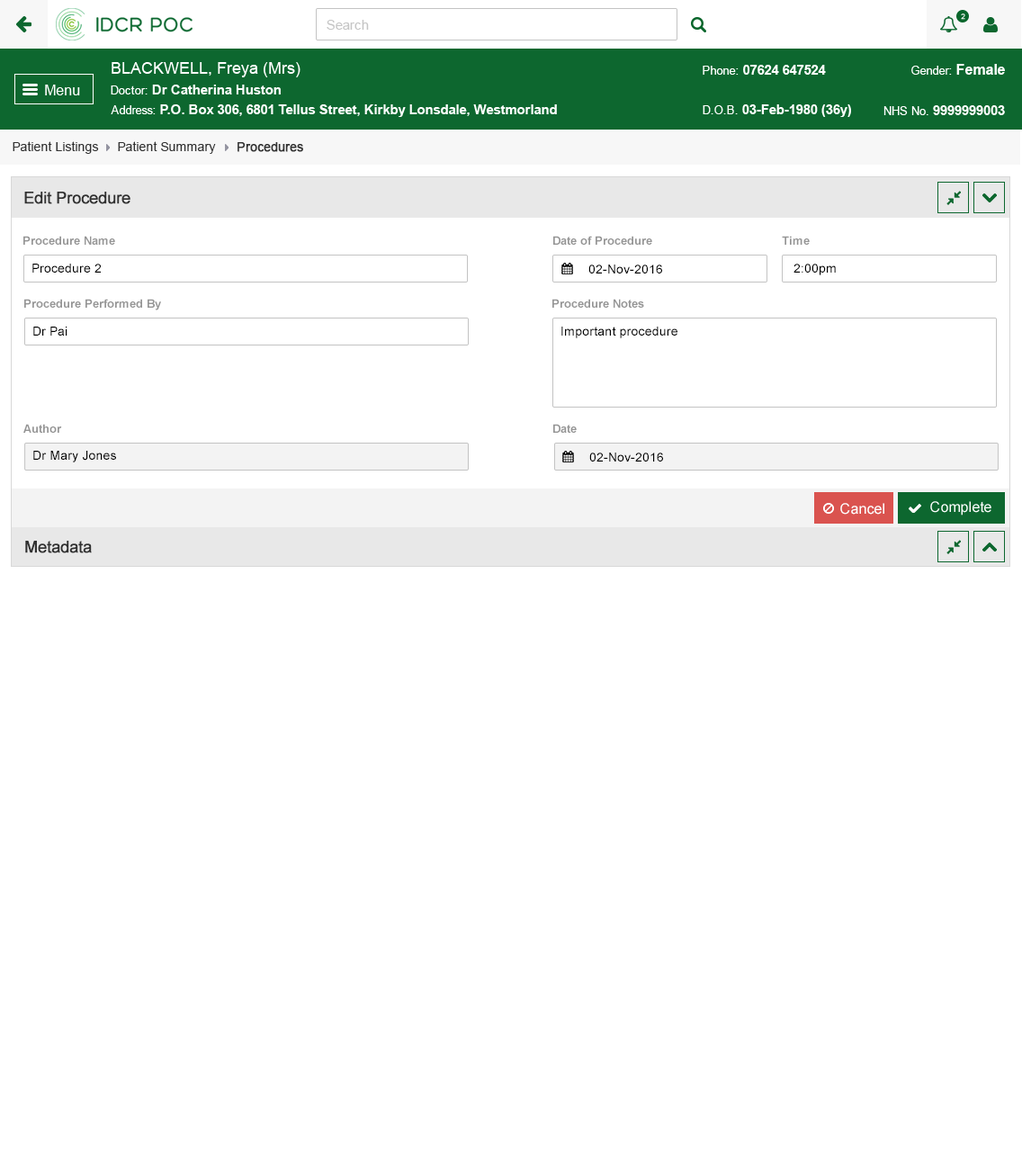
<style>
.page{position:relative;width:1022px;height:1166px;background:#ffffff}
.page>*{position:absolute;margin:0}
.t1{font:12.6px "ArialMT";color:#313131}
.t2{font:12.6px "ArialMT";color:#313131;font-weight:bold}
.t3{font:16.2px "ArialMT";color:#303030;font-weight:bold}
.t4{font:11.7px "Arial-BoldMT";color:#959595}
.t5{font:12.6px "ArialMT";color:#000000}
</style>
<div class="page">
<p class="t1" style="left:13px;top:141px;width:86px;height:13px">Patient Listings</p>
<p class="t1" style="left:118px;top:141px;width:98px;height:13px">Patient Summary</p>
<p class="t2" style="left:238px;top:142px;width:65px;height:10px">Procedures</p>
<p class="t3" style="left:24px;top:192px;width:106px;height:12px">Edit Procedure</p>
<p class="t4" style="left:23px;top:236px;width:92px;height:9px">Procedure Name</p>
<p class="t4" style="left:553px;top:236px;width:99px;height:9px">Date of Procedure</p>
<p class="t4" style="left:782px;top:236px;width:28px;height:9px">Time</p>
<p class="t5" style="left:32px;top:264px;width:69px;height:9px">Procedure 2</p>
<p class="t5" style="left:589px;top:265px;width:73px;height:9px">02-Nov-2016</p>
<p class="t5" style="left:794px;top:264px;width:42px;height:11px">2:00pm</p>
<p class="t4" style="left:24px;top:299px;width:137px;height:11px">Procedure Performed By</p>
<p class="t4" style="left:553px;top:299px;width:91px;height:9px">Procedure Notes</p>
<p class="t5" style="left:33px;top:327px;width:34px;height:9px">Dr Pai</p>
<p class="t5" style="left:562px;top:327px;width:116px;height:11px">Important procedure</p>
<p class="t4" style="left:23px;top:424px;width:39px;height:9px">Author</p>
<p class="t4" style="left:553px;top:424px;width:24px;height:9px">Date</p>
<p class="t5" style="left:33px;top:451px;width:83px;height:12px">Dr Mary Jones</p>
<p class="t5" style="left:589px;top:453px;width:74px;height:9px">02-Nov-2016</p>
<p class="t3" style="left:25px;top:541px;width:67px;height:12px">Metadata</p>
</div>
